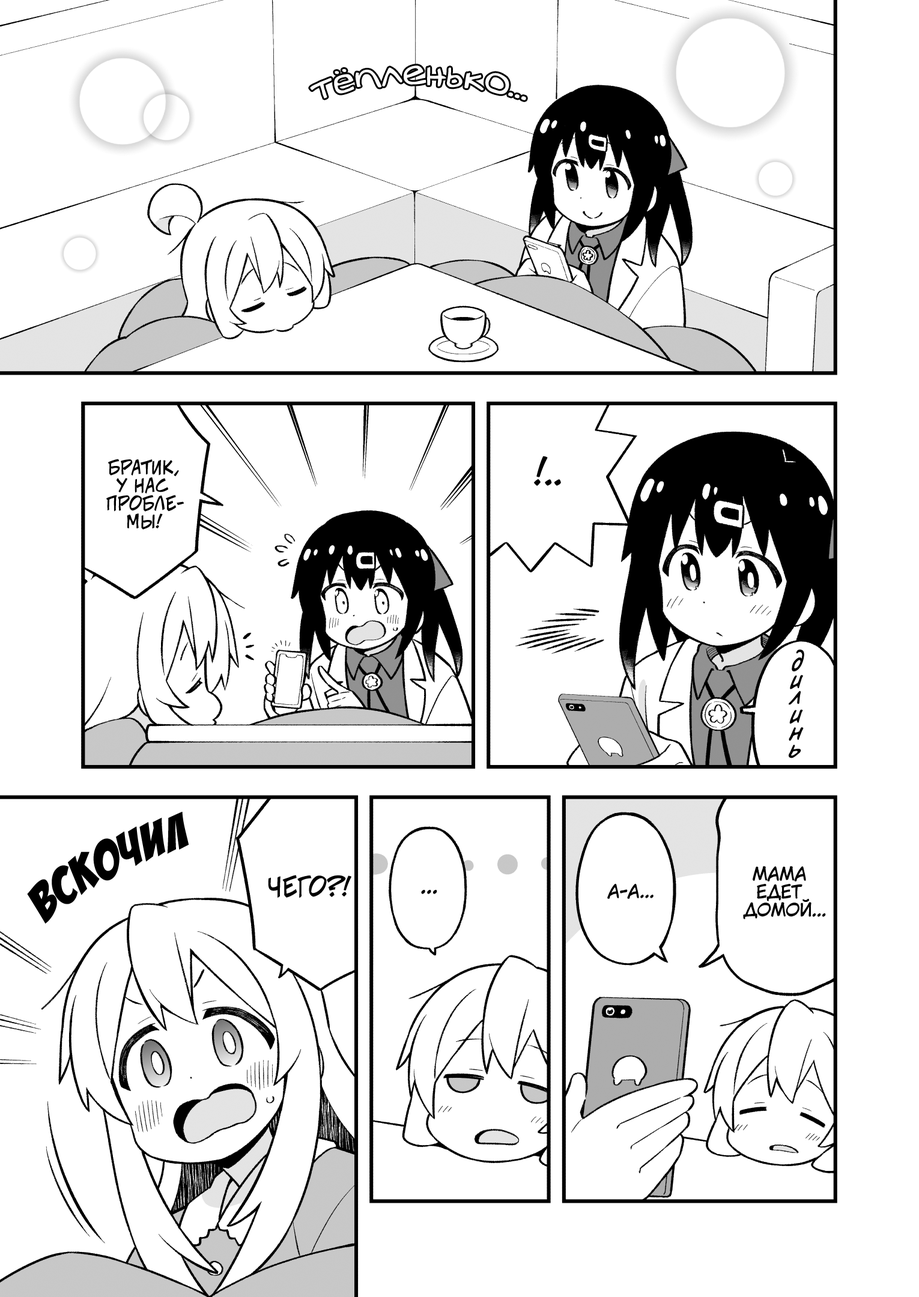
<style>
.page{position:relative;width:919px;height:1297px;background:#ffffff}
.page>*{position:absolute;margin:0}
.t1{font:18px "v_CCJeffCampbell";color:#000000;text-transform:uppercase}
.t2{font:28.8px "v_CCJeffCampbell";color:#000000;text-transform:uppercase}
.t3{font:36px "v_CCJeffCampbell";color:#000000;text-transform:uppercase}
.t4{font:25.2px "v_CCDearDiary";color:#000000}
.t5{font:54.1px "BadaBoom";color:#000000}
.t6{font:18px "KuraiVoice2";color:#000000;text-transform:uppercase}
.t7{font:25.2px "v_CCJeffCampbell";color:#000000;text-transform:uppercase}
.t8{font:21.6px "KuraiVoice2";color:#000000;text-transform:uppercase}
</style>
<div class="page">
<p class="t1" style="left:106px;top:459px;width:78px;height:71px;text-align:center">Братик,<br>у нас<br>пробле-<br>мы!</p>
<p class="t2" style="left:534px;top:456px;width:27px;height:30px"><span class="t3">!</span>..</p>
<p class="t4" style="left:792px;top:649px;width:12px;height:23px">д</p>
<p class="t4" style="left:790px;top:675px;width:13px;height:15px">и</p>
<p class="t4" style="left:789px;top:691px;width:12px;height:14px">л</p>
<p class="t4" style="left:789px;top:709px;width:14px;height:15px">и</p>
<p class="t4" style="left:789px;top:727px;width:15px;height:14px">н</p>
<p class="t4" style="left:789px;top:745px;width:12px;height:14px">ь</p>
<p class="t5" style="left:27px;top:812px;width:162px;height:112px;rotate:-28deg">вскочил</p>
<p class="t6" style="left:743px;top:866px;width:83px;height:54px;text-align:center">Мама<br>едет<br>домой...</p>
<p class="t7" style="left:268px;top:875px;width:83px;height:23px">Чего?!</p>
<p class="t8" style="left:421px;top:890px;width:16px;height:4px">...</p>
<p class="t6" style="left:607px;top:884px;width:47px;height:15px">А-а...</p>
</div>
